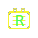
<style>
.page{position:relative;width:38px;height:38px;background:#ffffff}
.page>*{position:absolute;margin:0}
.t1{font:18px "Calibri";color:#47ff56}
</style>
<div class="page">
<p class="t1" style="left:16px;top:15px;width:8px;height:11px">R</p>
</div>
